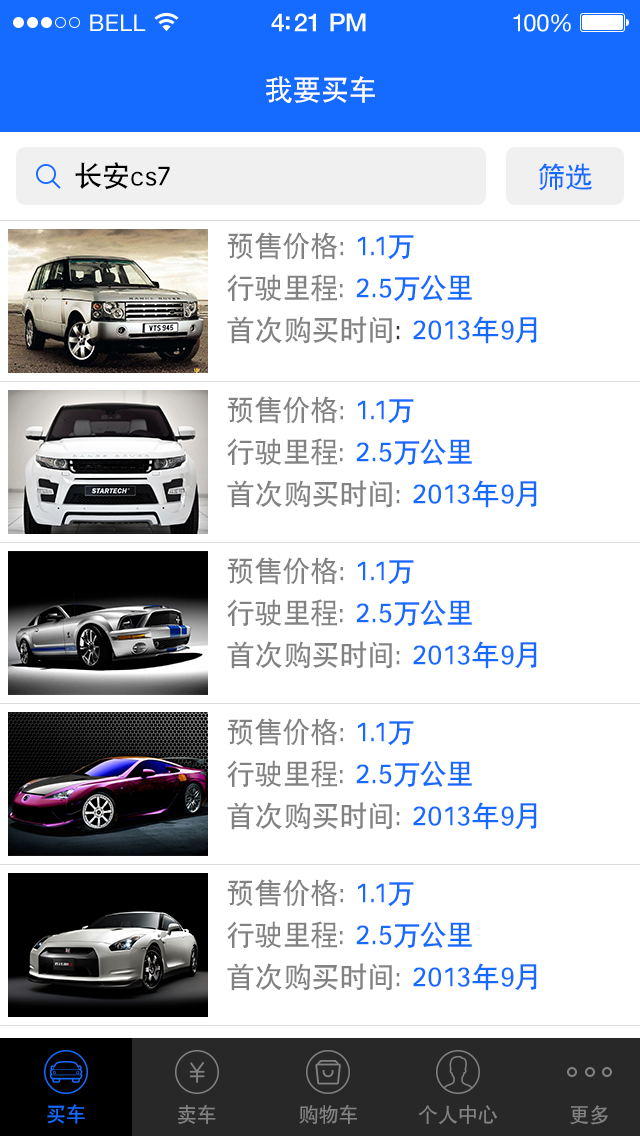
<style>
.page{position:relative;width:640px;height:1136px;background:#ffffff}
.page>*{position:absolute;margin:0}
.t1{font:28px "SIL-Hei-Med-Jian";color:#ffffff}
.t2{font:28px "SIL-Hei-Med-Jian";letter-spacing:-0.01em;color:#000000}
.t3{font:28px "SIL-Hei-Med-Jian";letter-spacing:-0.01em;color:#156bff}
.t4{font:28px/42px "SIL-Hei-Med-Jian";color:#156bff}
.t5{font:28px/42px "SIL-Hei-Med-Jian";color:#828282}
.t6{font:28px/42px "SIL-Hei-Med-Jian";color:#323232}
.t7{font:20px "SIL-Hei-Med-Jian";color:#156bff}
.t8{font:20px "SIL-Hei-Med-Jian";color:#828282}
</style>
<div class="page">
<p class="t1" style="left:266px;top:76px;width:109px;height:27px">我要买车</p>
<p class="t2" style="left:75px;top:162px;width:95px;height:28px">长安cs7</p>
<p class="t3" style="left:538px;top:163px;width:55px;height:28px">筛选</p>
<p class="t4" style="left:227px;top:232px;width:310px;height:112px"><span class="t5">预售价格：</span>1.1万<br><span class="t5">行驶里程：</span>2.5万公里<br><span class="t5">首次购买时间</span><span class="t6">：</span>2013年9月</p>
<p class="t5" style="left:227px;top:396px;width:310px;height:112px">预售价格：<span class="t4">1.1万<br></span>行驶里程：<span class="t4">2.5万公里<br></span>首次购买时间：<span class="t4">2013年9月</span></p>
<p class="t5" style="left:227px;top:557px;width:310px;height:112px">预售价格：<span class="t4">1.1万<br></span>行驶里程：<span class="t4">2.5万公里<br></span>首次购买时间：<span class="t4">2013年9月</span></p>
<p class="t5" style="left:227px;top:718px;width:310px;height:112px">预售价格：<span class="t4">1.1万<br></span>行驶里程：<span class="t4">2.5万公里<br></span>首次购买时间：<span class="t4">2013年9月</span></p>
<p class="t5" style="left:227px;top:879px;width:310px;height:112px">预售价格：<span class="t4">1.1万<br></span>行驶里程：<span class="t4">2.5万公里<br></span>首次购买时间：<span class="t4">2013年9月</span></p>
<p class="t7" style="left:47px;top:1104px;width:38px;height:20px">买车</p>
<p class="t8" style="left:178px;top:1104px;width:38px;height:20px">卖车</p>
<p class="t8" style="left:299px;top:1104px;width:58px;height:20px">购物车</p>
<p class="t8" style="left:418px;top:1105px;width:79px;height:19px">个人中心</p>
<p class="t8" style="left:570px;top:1105px;width:38px;height:20px">更多</p>
</div>
